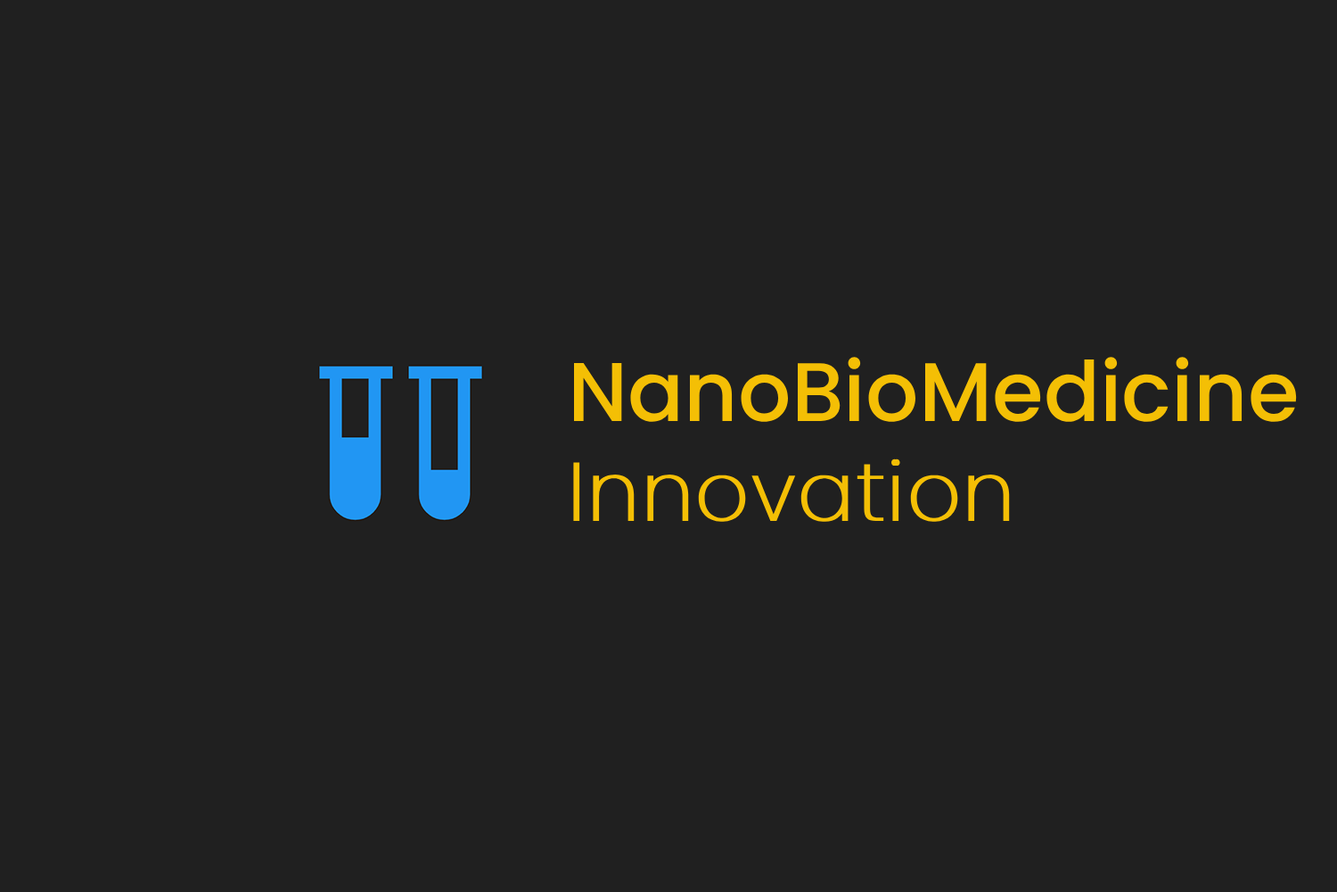
<style>
.page{position:relative;width:1337px;height:892px;background:#202020}
.page>*{position:absolute;margin:0}
.t1{font:83.2px "Poppins-Medium";color:#f4bf05}
.t2{font:83.2px "Poppins-ExtraLight";color:#f4bf05;font-weight:bold}
</style>
<div class="page">
<p class="t1" style="left:573px;top:357px;width:724px;height:165px">NanoBioMedicine<br><span class="t2">Innovation</span></p>
</div>
